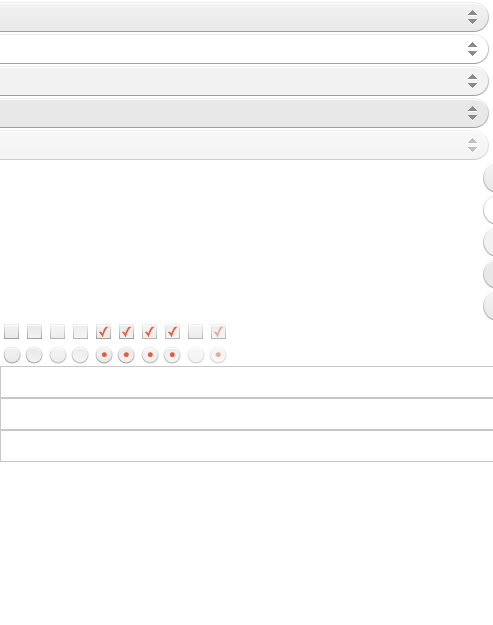
<style>
.page{position:relative;width:493px;height:625px;background:#ffffff}
.page>*{position:absolute;margin:0}
.t1{font:14px "LucidaGrande";color:#e15d46}
.t2{font:14px "LucidaGrande";color:#e8a79b}
</style>
<div class="page">
<p class="t1" style="left:99px;top:326px;width:10px;height:12px">✓</p>
<p class="t1" style="left:122px;top:326px;width:10px;height:12px">✓</p>
<p class="t1" style="left:145px;top:326px;width:10px;height:12px">✓</p>
<p class="t1" style="left:168px;top:326px;width:10px;height:12px">✓</p>
<p class="t2" style="left:214px;top:326px;width:10px;height:12px">✓</p>
</div>
